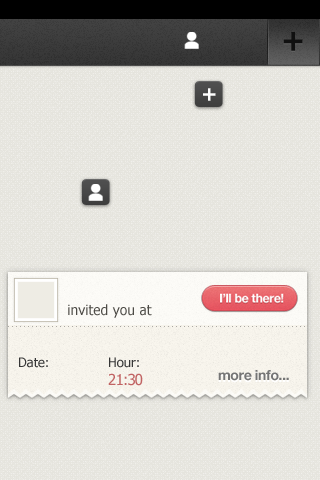
<style>
.page{position:relative;width:320px;height:480px}
.page>*{position:absolute;margin:0}
.t1{font:30px "Tahoma-Bold";color:#101010}
.t2{font:30px "Tahoma-Bold";color:#111111}
.t3{font:14px "Tahoma";color:#4d4b46}
.t4{font:13px "Tahoma";color:#363636}
.t5{font:13px/18px "Tahoma";color:#363636}
.t6{font:15px/18px "Tahoma";letter-spacing:-0.05em;color:#c16363}
.t7{font:14px "HelveticaNeue-Bold";letter-spacing:-0.025em;color:#757575}
</style>
<div class="page">
<p class="t1" style="left:283px;top:33px;width:20px;height:19px">+</p>
<p class="t2" style="left:283px;top:32px;width:20px;height:19px">+</p>
<p class="t3" style="left:68px;top:304px;width:84px;height:14px">invited you at</p>
<p class="t4" style="left:19px;top:357px;width:29px;height:11px">Date:</p>
<p class="t5" style="left:108px;top:357px;width:35px;height:29px">Hour: <br><span class="t6">21:30</span></p>
<p class="t7" style="left:218px;top:370px;width:71px;height:11px">more info...</p>
</div>
